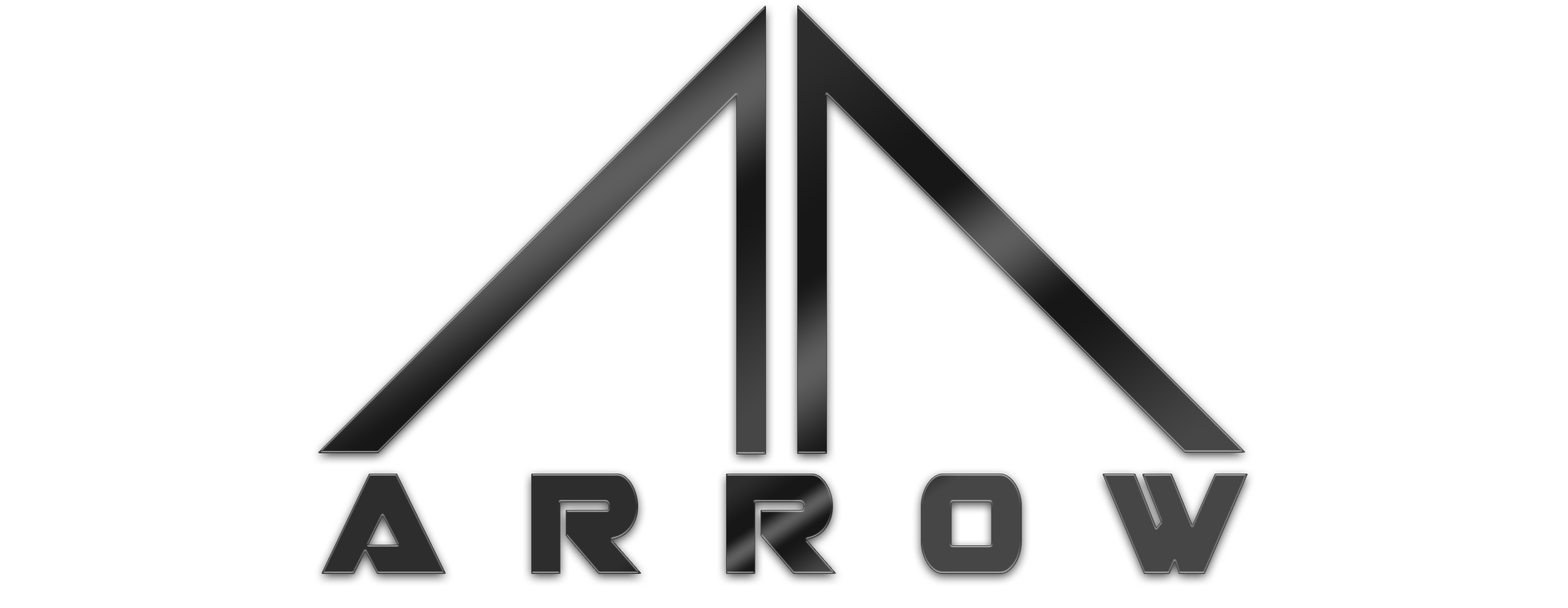
<style>
.page{position:relative;width:1568px;height:608px;background:#ffffff}
.page>*{position:absolute;margin:0}
.t1{font:149.4px "GeminaCondensed";letter-spacing:0.53em;color:#404040}
</style>
<div class="page">
<p class="t1" style="left:322px;top:474px;width:925px;height:100px">arrow</p>
</div>
